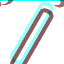
<style>
.page{position:relative;width:64px;height:64px;background:#ffffff}
.page>*{position:absolute;margin:0}
.t1{font:62px "LilitaOne"}
</style>
<div class="page">
<p class="t1" style="left:14px;top:4px;width:36px;height:56px">/</p>
</div>
